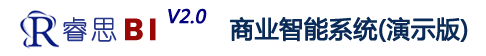
<style>
.page{position:relative;width:486px;height:56px;background:#ffffff}
.page>*{position:absolute;margin:0}
.t1{font:18px "MicrosoftYaHei";color:#000080;font-weight:bold;font-style:italic}
.t2{font:24px "MicrosoftYaHei";color:#0a2b57;font-weight:bold}
</style>
<div class="page">
<p class="t1" style="left:168px;top:8px;width:39px;height:16px">V2.0</p>
<p class="t2" style="left:230px;top:16px;width:238px;height:26px">商业智能系统(演示版)</p>
</div>
